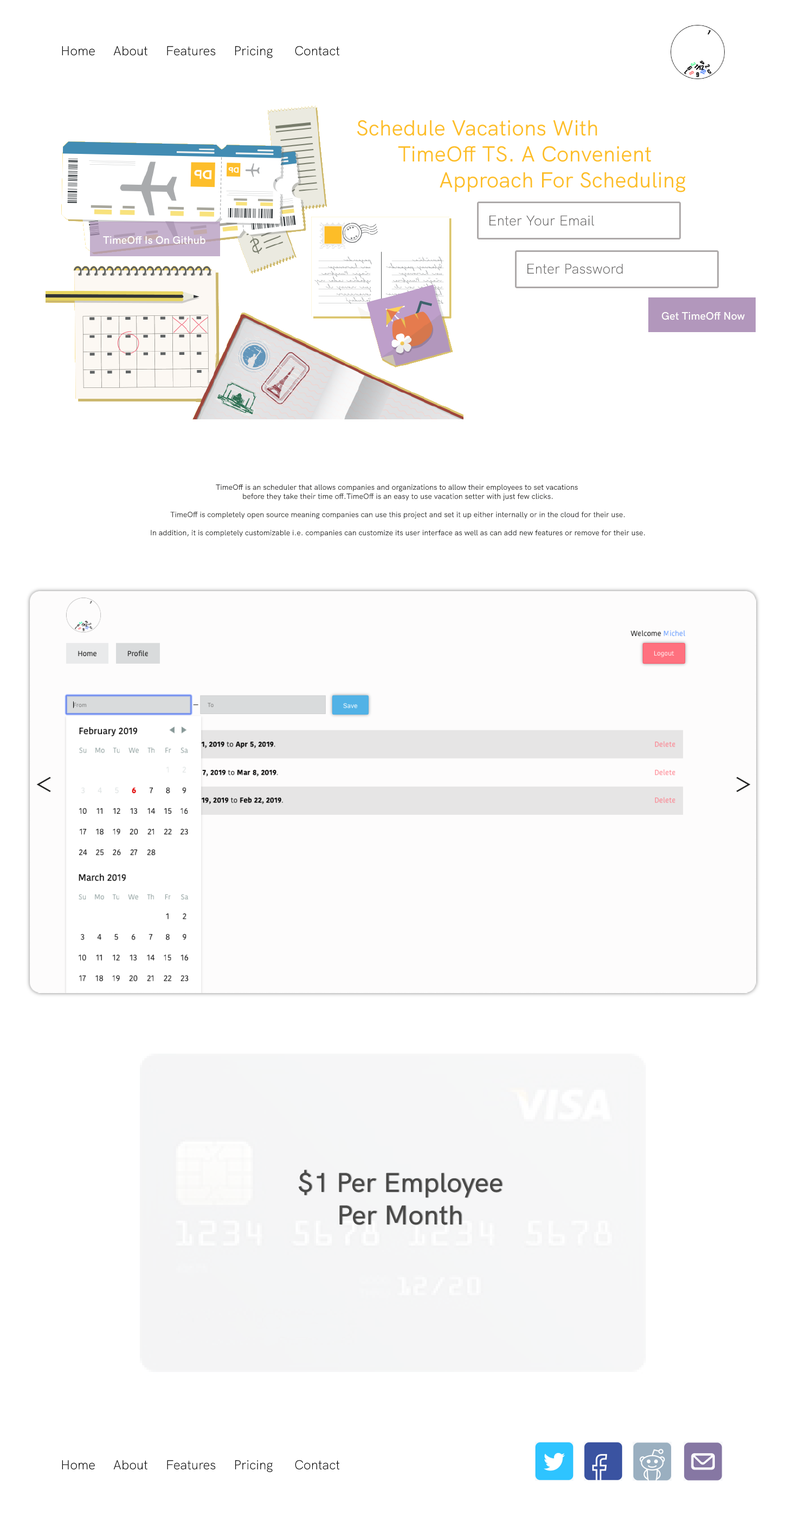
<style>
.page{position:relative;width:786px;height:1517px;background:#ffffff}
.page>*{position:absolute;margin:0}
.t1{font:13px "HKGrotesk-Light";color:#000000}
.t2{font:21.7px "HKGrotesk-Regular";color:#fdbd28}
.t3{font:14.1px "HKGrotesk-Light";color:#646363}
.t4{font:10.8px "HKGrotesk-SemiBold";color:#fdfdfc}
.t5{font:10.8px "HKGrotesk-SemiBold";color:#fcfcfa}
.t6{font:7.6px "HKGrotesk-Regular";color:#252524}
.t7{font:27.1px "HKGrotesk-Regular";color:#252524}
.t8{font:27.1px "HKGrotesk-Medium";color:#4a4a49}
</style>
<div class="page">
<p class="t1" style="left:62px;top:46px;width:278px;height:13px">Home     About     Features     Pricing      Contact</p>
<p class="t2" style="left:357px;top:120px;width:329px;height:72px">Schedule Vacations With<br>       TimeOff TS. A Convenient<br>              Approach For Scheduling</p>
<p class="t3" style="left:489px;top:215px;width:105px;height:11px">Enter Your Email</p>
<p class="t4" style="left:103px;top:236px;width:102px;height:8px">TimeOff Is On Github</p>
<p class="t3" style="left:527px;top:263px;width:96px;height:11px">Enter Password</p>
<p class="t5" style="left:661px;top:312px;width:84px;height:8px">Get TimeOff Now</p>
<p class="t6" style="left:151px;top:484px;width:494px;height:53px;text-align:center">TimeOff is an scheduler that allows companies and organizations to allow their employees to set vacations <br>before they take their time off.TimeOff is an easy to use vacation setter with just few clicks.<br><br>TimeOff is completely open source meaning companies can use this project and set it up either internally or in the cloud for their use.<br><br>In addition, it is completely customizable i.e. companies can customize its user interface as well as can add new features or remove for their use.</p>
<p class="t7" style="left:36px;top:777px;width:15px;height:15px">&lt;</p>
<p class="t7" style="left:736px;top:777px;width:15px;height:15px">&gt;</p>
<p class="t8" style="left:298px;top:1170px;width:204px;height:55px;text-align:center">$1 Per Employee<br>Per Month</p>
<p class="t1" style="left:62px;top:1461px;width:278px;height:12px">Home     About     Features     Pricing      Contact</p>
</div>
